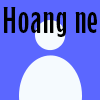
<style>
.page{position:relative;width:100px;height:100px;background:#5b67ff}
.page>*{position:absolute;margin:0}
.t1{font:37.5px "VNMSansDisplay-Regular";letter-spacing:0.05em;color:#000000}
</style>
<div class="page">
<p class="t1" style="left:3px;top:7px;width:94px;height:30px">Hoang ne</p>
</div>
